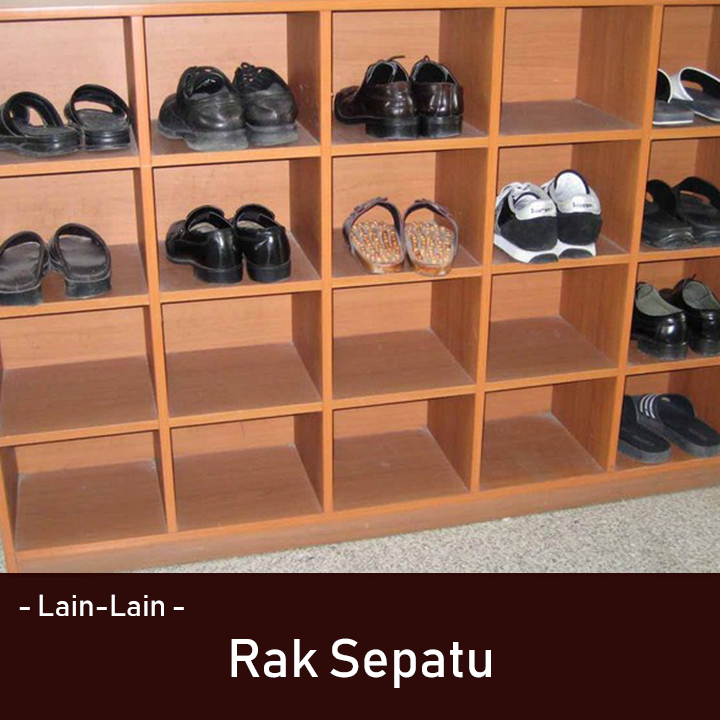
<style>
.page{position:relative;width:720px;height:720px}
.page>*{position:absolute;margin:0}
.t1{font:30px "Bahnschrift";color:#ffffff}
.t2{font:53.6px "Bahnschrift";color:#ffffff}
</style>
<div class="page">
<p class="t1" style="left:19px;top:594px;width:165px;height:22px">- Lain-Lain -</p>
<p class="t2" style="left:231px;top:638px;width:260px;height:50px">Rak Sepatu</p>
</div>
